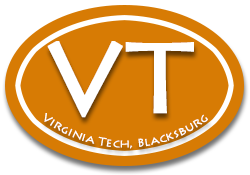
<style>
.page{position:relative;width:250px;height:175px;background:#d77b04}
.page>*{position:absolute;margin:0}
.t1{font:100px "LithosPro-Regular";color:#ffffff;font-weight:bold}
.t2{font:11px "LithosPro-Regular";color:#ffffff}
</style>
<div class="page">
<p class="t1" style="left:47px;top:41px;width:147px;height:77px">VT</p>
<p class="t2" style="left:44px;top:113px;width:164px;height:36px;text-align:center">Virginia Tech, Blacksburg</p>
</div>
